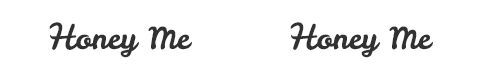
<style>
.page{position:relative;width:482px;height:80px;background:#ffffff}
.page>*{position:absolute;margin:0}
.t1{font:30px "LeckerliOne-Regular";color:#313131}
.t2{font:30px "Pacifico-Regular";color:#313131}
</style>
<div class="page">
<p class="t1" style="left:49px;top:22px;width:143px;height:36px"><span class="t2">H</span>oney Me</p>
<p class="t1" style="left:290px;top:22px;width:143px;height:36px"><span class="t2">H</span>oney Me</p>
</div>
